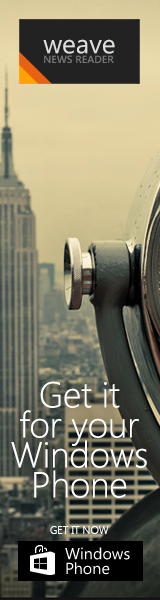
<style>
.page{position:relative;width:160px;height:600px}
.page>*{position:absolute;margin:0}
.t1{font:10.4px/9.7px "SegoeUI-Semibold";color:#767676}
.t2{font:26.3px/9.7px "SegoeUI";color:#dfdfdf}
.t3{font:36px/30px "SegoeUI-Light";color:#ffffff}
.t4{font:11px "SegoeUI-Light";color:#ffffff}
</style>
<div class="page">
<p class="t1" style="left:43px;top:39px;width:72px;height:24px"><span class="t2">weave<br></span>NEWS READER</p>
<p class="t3" style="left:11px;top:381px;width:136px;height:117px;text-align:center">Get it<br>for your<br>Windows<br>Phone</p>
<p class="t4" style="left:50px;top:526px;width:59px;height:8px">GET IT NOW</p>
</div>
